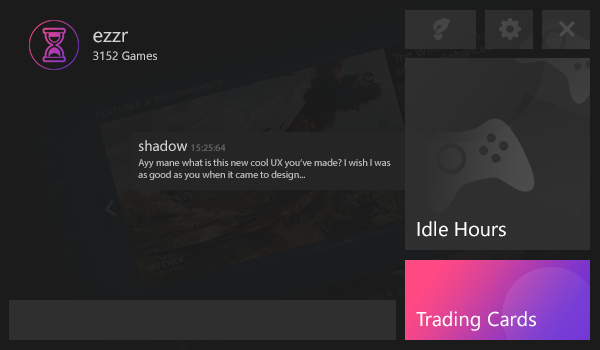
<style>
.page{position:relative;width:600px;height:350px}
.page>*{position:absolute;margin:0}
.t1{font:12px/18px "SegoeUI";color:#d4d4d4}
.t2{font:20px/18px "SegoeUI";color:#d4d4d4}
.t3{font:10px "MyriadPro-Regular";color:#6d6d6d}
.t4{font:15px "MyriadPro-Regular";color:#d4d4d4}
.t5{font:10px "MyriadPro-Regular";color:#c3c3c3}
.t6{font:20px "SegoeUI";color:#ffffff}
</style>
<div class="page">
<p class="t1" style="left:93px;top:31px;width:64px;height:29px"><span class="t2">ezzr<br></span>3152 Games</p>
<p class="t3" style="left:138px;top:140px;width:88px;height:11px"><span class="t4">shadow </span>15:25:64</p>
<p class="t5" style="left:138px;top:158px;width:253px;height:22px">Ayy mane what is this new cool UX you’ve made? I wish I was as good as you when it came to design...</p>
<p class="t6" style="left:417px;top:221px;width:89px;height:16px">Idle Hours</p>
<p class="t6" style="left:416px;top:311px;width:120px;height:20px">Trading Cards</p>
</div>
